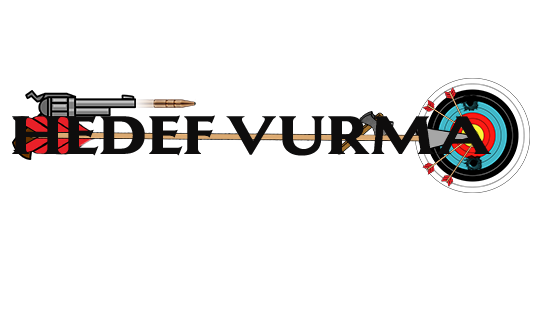
<style>
.page{position:relative;width:544px;height:314px;background:#ffffff}
.page>*{position:absolute;margin:0}
.t1{font:48.2px "OPTILagoon-ExtraBold";color:#0e0d0d;scale:0.96 1}
</style>
<div class="page">
<p class="t1" style="left:12px;top:115px;width:479px;height:41px">HEDEF VURMA</p>
</div>
